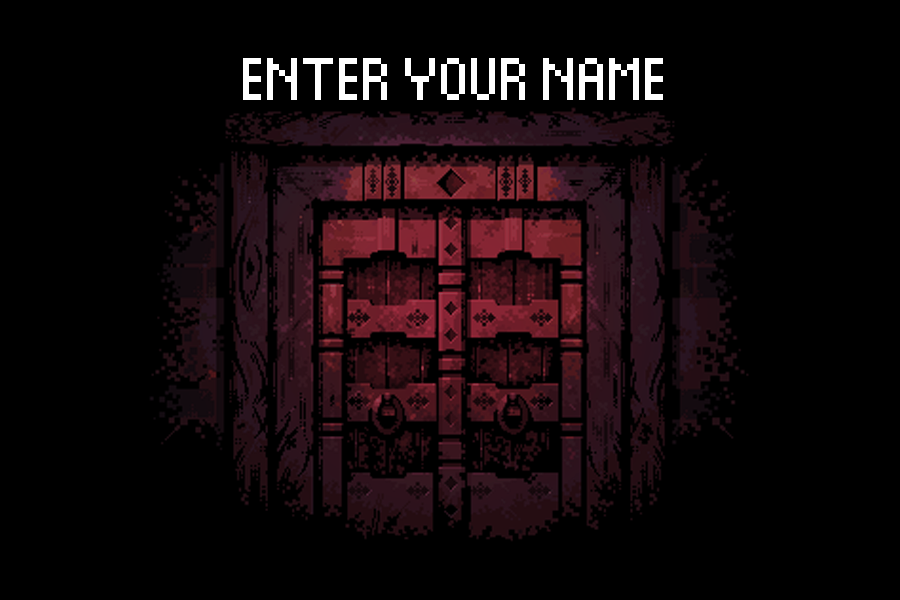
<style>
.page{position:relative;width:900px;height:600px;background:#000000}
.page>*{position:absolute;margin:0}
.t1{font:96px "Thintel";color:#ffffff}
</style>
<div class="page">
<p class="t1" style="left:243px;top:58px;width:420px;height:42px">ENTER YOUR NAME</p>
</div>
